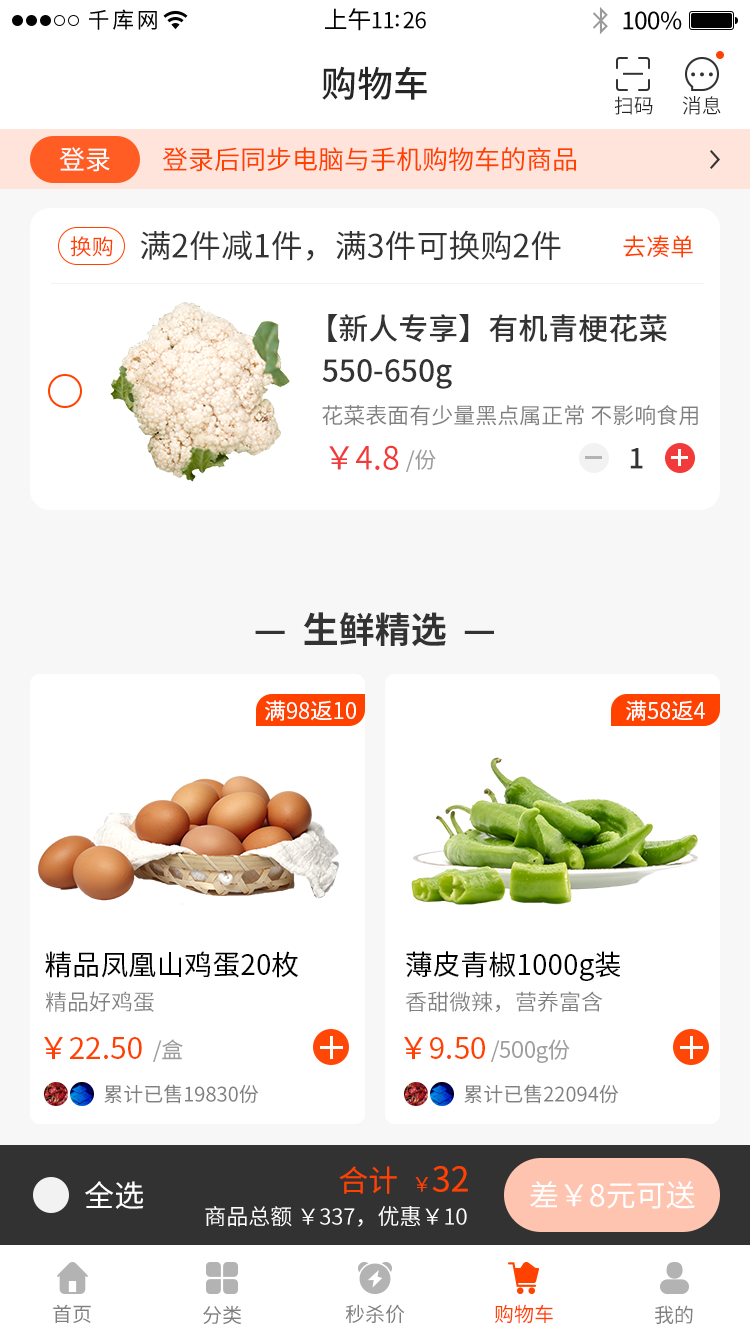
<style>
.page{position:relative;width:750px;height:1334px;background:#ffffff}
.page>*{position:absolute;margin:0}
.t1{font:22px "SourceHanSansCN-Regular";letter-spacing:0.12em;color:#030303}
.t2{font:22px "SourceHanSansCN-Regular";letter-spacing:-0.02em;color:#030303}
.t3{font:24px "SourceHanSansCN-Regular";letter-spacing:-0.02em;color:#030303}
.t4{font:36px "SourceHanSansCN-Medium";color:#262626}
.t5{font:20px "SourceHanSansCN-Normal";color:#262626}
.t6{font:26px "SourceHanSansCN-Regular";color:#ffffff}
.t7{font:26px "SourceHanSansCN-Regular";color:#ff4200}
.t8{font:32px "SourceHanSansCN-Regular";color:#333333}
.t9{font:22px "SourceHanSansCN-Regular";color:#ff4200}
.t10{font:24px "SourceHanSansCN-Regular";color:#ff4200}
.t11{font:30px/42px "SourceHanSansCN-Medium";color:#333333}
.t12{font:22px "SourceHanSansCN-Regular";color:#808080}
.t13{font:32px "SourceHanSansCN-Regular";color:#f23a3a}
.t14{font:22px "SourceHanSansCN-Normal";color:#9d9d9d}
.t15{font:28px "SourceHanSansCN-Medium";color:#333333}
.t16{font:36px "SourceHanSansCN-Bold";color:#333333}
.t17{font:22px "SourceHanSansCN-Regular";color:#ffffff}
.t18{font:28px "SourceHanSansCN-Regular";color:#010101}
.t19{font:22px "SourceHanSansCN-Normal";color:#808080}
.t20{font:30px "SourceHanSansCN-Regular";color:#ff4200}
.t21{font:20px "SourceHanSansCN-Regular";color:#808080}
.t22{font:20px "SourceHanSansCN-Regular";color:#ff4200}
.t23{font:34px "SourceHanSansCN-Regular";color:#ff4200}
.t24{font:30px "SourceHanSansCN-Regular";color:#ffffff}
.t25{font:22px "SourceHanSansCN-Normal";color:#ffffff}
</style>
<div class="page">
<p class="t1" style="left:89px;top:9px;width:68px;height:21px">千库网</p>
<p class="t2" style="left:325px;top:8px;width:101px;height:23px"><span class="t3">上午</span>11:26</p>
<p class="t3" style="left:623px;top:11px;width:59px;height:19px">100%</p>
<p class="t4" style="left:322px;top:66px;width:105px;height:34px">购物车</p>
<p class="t5" style="left:614px;top:96px;width:39px;height:19px">扫码</p>
<p class="t5" style="left:682px;top:96px;width:39px;height:19px">消息</p>
<p class="t6" style="left:59px;top:147px;width:51px;height:25px">登录</p>
<p class="t7" style="left:162px;top:147px;width:414px;height:25px">登录后同步电脑与手机购物车的商品</p>
<p class="t8" style="left:140px;top:230px;width:421px;height:31px">满2件减1件，满3件可换购2件</p>
<p class="t9" style="left:70px;top:236px;width:43px;height:21px">换购</p>
<p class="t10" style="left:623px;top:235px;width:70px;height:23px">去凑单</p>
<p class="t11" style="left:322px;top:314px;width:345px;height:75px">【新人专享】有机青梗花菜<br>  550-650g</p>
<p class="t12" style="left:322px;top:405px;width:376px;height:21px">花菜表面有少量黑点属正常 不影响食用</p>
<p class="t13" style="left:329px;top:445px;width:70px;height:25px">￥4.8</p>
<p class="t14" style="left:406px;top:449px;width:30px;height:23px">/份</p>
<p class="t15" style="left:630px;top:448px;width:13px;height:21px">1</p>
<p class="t16" style="left:255px;top:612px;width:239px;height:35px">—  生鲜精选  —</p>
<p class="t17" style="left:265px;top:700px;width:91px;height:21px">满98返10</p>
<p class="t17" style="left:626px;top:700px;width:79px;height:21px">满58返4</p>
<p class="t18" style="left:45px;top:951px;width:253px;height:27px">精品凤凰山鸡蛋20枚</p>
<p class="t18" style="left:406px;top:951px;width:215px;height:30px">薄皮青椒1000g装</p>
<p class="t19" style="left:45px;top:991px;width:109px;height:21px">精品好鸡蛋</p>
<p class="t19" style="left:405px;top:991px;width:198px;height:21px">香甜微辣，营养富含</p>
<p class="t20" style="left:44px;top:1036px;width:98px;height:24px">￥22.50</p>
<p class="t20" style="left:404px;top:1036px;width:81px;height:24px">￥9.50</p>
<p class="t14" style="left:153px;top:1039px;width:30px;height:23px">/盒</p>
<p class="t14" style="left:491px;top:1039px;width:79px;height:24px">/500g份</p>
<p class="t21" style="left:104px;top:1084px;width:155px;height:20px">累计已售19830份</p>
<p class="t21" style="left:464px;top:1084px;width:155px;height:20px">累计已售22094份</p>
<p class="t20" style="left:339px;top:1166px;width:129px;height:28px">合计  <span class="t22">￥</span><span class="t23">32</span></p>
<p class="t24" style="left:85px;top:1181px;width:59px;height:28px">全选</p>
<p class="t24" style="left:530px;top:1181px;width:165px;height:28px">差￥8元可送</p>
<p class="t25" style="left:205px;top:1206px;width:262px;height:21px">商品总额 ￥337，优惠￥10</p>
<p class="t21" style="left:53px;top:1304px;width:38px;height:19px">首页</p>
<p class="t21" style="left:203px;top:1305px;width:39px;height:20px">分类</p>
<p class="t21" style="left:345px;top:1304px;width:60px;height:20px">秒杀价</p>
<p class="t22" style="left:495px;top:1304px;width:58px;height:20px">购物车</p>
<p class="t21" style="left:655px;top:1305px;width:38px;height:19px">我的</p>
</div>
